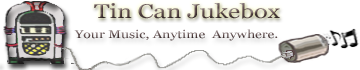
<style>
.page{position:relative;width:360px;height:70px;background:#ffffff}
.page>*{position:absolute;margin:0}
.t1{font:20px "Georgia";color:#5c4949;scale:1.25 1}
.t2{font:11.2px "Georgia";color:#5c4949;scale:1.25 1}
</style>
<div class="page">
<p class="t1" style="left:94px;top:3px;width:186px;height:16px">Tin Can Jukebox</p>
<p class="t2" style="left:74px;top:29px;width:204px;height:12px">Your Music, Anytime  Anywhere.</p>
</div>
